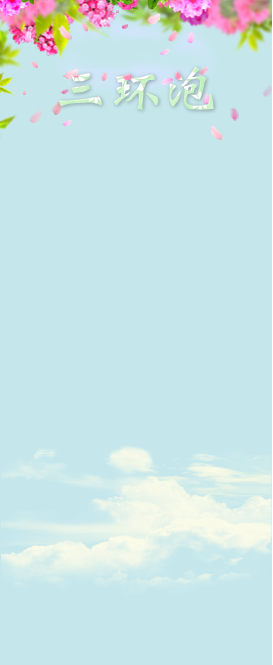
<style>
.page{position:relative;width:273px;height:665px;background:#c5e7ec}
.page>*{position:absolute;margin:0}
.t1{font:55px "FZWBJW--GB1-0"}
</style>
<div class="page">
<p class="t1" style="left:59px;top:66px;width:155px;height:44px">三环泡</p>
</div>
